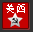
<style>
.page{position:relative;width:33px;height:32px;background:#c50000}
.page>*{position:absolute;margin:0}
.t1{font:10.4px "SimSun";color:#ffffff}
</style>
<div class="page">
<p class="t1" style="left:6px;top:4px;width:19px;height:9px">美西</p>
</div>
